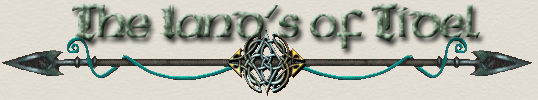
<style>
.page{position:relative;width:538px;height:100px}
.page>*{position:absolute;margin:0}
.t1{font:48px "Celtic-Condensed-Bold"}
.t2{font:48px "CathedralNormal"}
</style>
<div class="page">
<p class="t1" style="left:72px;top:3px;width:409px;height:46px"><span class="t2">T</span>he <span class="t2">L</span>and’s of <span class="t2">T</span>idel</p>
</div>
